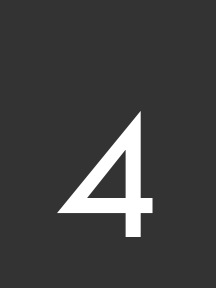
<style>
.page{position:relative;width:216px;height:288px;background:#333333}
.page>*{position:absolute;margin:0}
.t1{font:196px "TwCenMT-Regular";color:#ffffff}
</style>
<div class="page">
<p class="t1" style="left:57px;top:111px;width:96px;height:126px">4</p>
</div>
